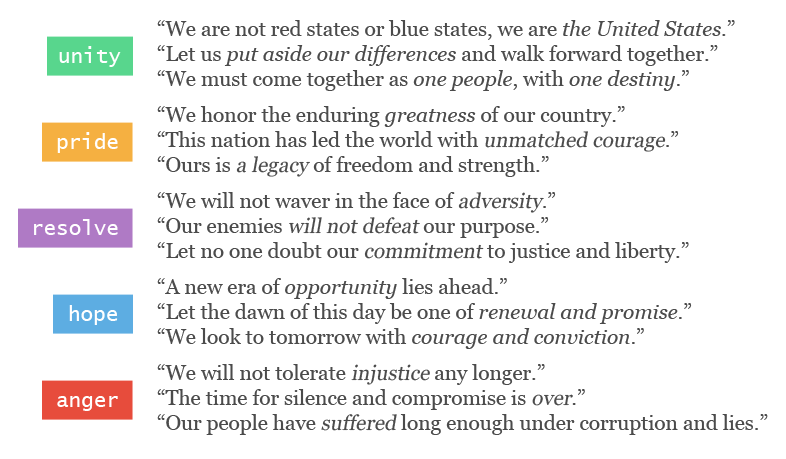
<style>
.page{position:relative;width:786px;height:459px;background:#ffffff}
.page>*{position:absolute;margin:0}
.t1{font:20.8px "Georgia";color:#4b4b4b}
.t2{font:20.8px "Georgia-Italic";color:#4b4b4b}
.t3{font:20.8px "Georgia";color:#4b4b4b;font-style:italic}
</style>
<div class="page">
<p class="t1" style="left:157px;top:20px;width:578px;height:71px;text-align:justify">“We are not red states or blue states, we are <span class="t2">the United States</span>.”<br>“Let us <span class="t2">put aside our differences</span> and walk forward together.”<br>“We must come together as <span class="t2">one people</span>, with <span class="t2">one destiny</span>.”</p>
<p class="t1" style="left:157px;top:106px;width:522px;height:71px;text-align:justify">“We honor the enduring <span class="t2">greatness</span> of our country.”<br>“This nation has led the world with <span class="t3">unmatched courage</span>.”<br>“Ours is <span class="t3">a legacy</span> of freedom and strength.”</p>
<p class="t1" style="left:157px;top:192px;width:532px;height:71px;text-align:justify">“We will not waver in the face of <span class="t3">adversity</span>.”<br>“Our enemies <span class="t3">will not defeat</span> our purpose.”<br>“Let no one doubt our <span class="t3">commitment </span>to justice and liberty.”</p>
<p class="t1" style="left:157px;top:278px;width:535px;height:71px;text-align:justify">“A new era of <span class="t2">opportunity</span> lies ahead.”<br>“Let the dawn of this day be one of <span class="t2">renewal and promise</span>.”<br>“We look to tomorrow with <span class="t2">courage and conviction</span>.”</p>
<p class="t1" style="left:157px;top:364px;width:611px;height:71px;text-align:justify">“We will not tolerate <span class="t3">injustice </span>any longer.”<br>“The time for silence and compromise is <span class="t3">over</span>.”<br>“Our people have <span class="t3">suffered </span>long enough under corruption and lies.”</p>
</div>
